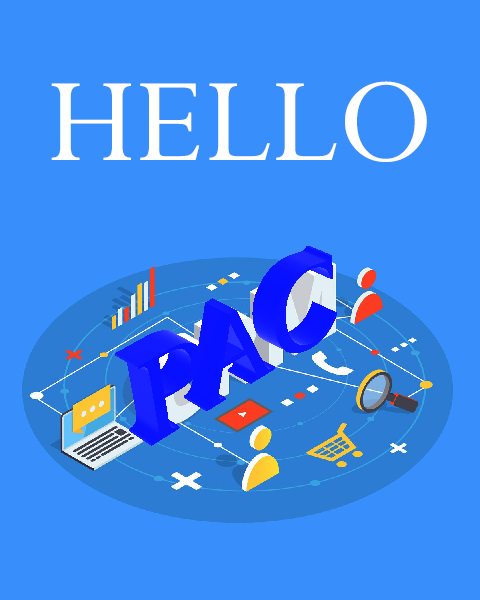
<style>
.page{position:relative;width:480px;height:600px;background:#388efb}
.page>*{position:absolute;margin:0}
.t1{font:133.3px "Perpetua";color:#ffffff}
</style>
<div class="page">
<p class="t1" style="left:51px;top:81px;width:376px;height:81px">HELLO</p>
</div>
